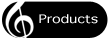
<style>
.page{position:relative;width:110px;height:40px;background:#000000}
.page>*{position:absolute;margin:0}
.t1{font:11.2px "Geneva";color:#ffffff;scale:1.25 1}
</style>
<div class="page">
<p class="t1" style="left:39px;top:14px;width:59px;height:10px">Products</p>
</div>
